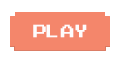
<style>
.page{position:relative;width:120px;height:60px;background:#ffffff}
.page>*{position:absolute;margin:0}
.t1{font:25px "ArcadeClassic";color:#fefcfc}
</style>
<div class="page">
<p class="t1" style="left:33px;top:24px;width:54px;height:14px">play</p>
</div>
